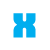
<style>
.page{position:relative;width:50px;height:50px;background:#ffffff}
.page>*{position:absolute;margin:0}
.t1{font:50px "Bauhaus93";letter-spacing:0.2em;color:#00aeef}
</style>
<div class="page">
<p class="t1" style="left:13px;top:13px;width:23px;height:25px">x</p>
</div>
